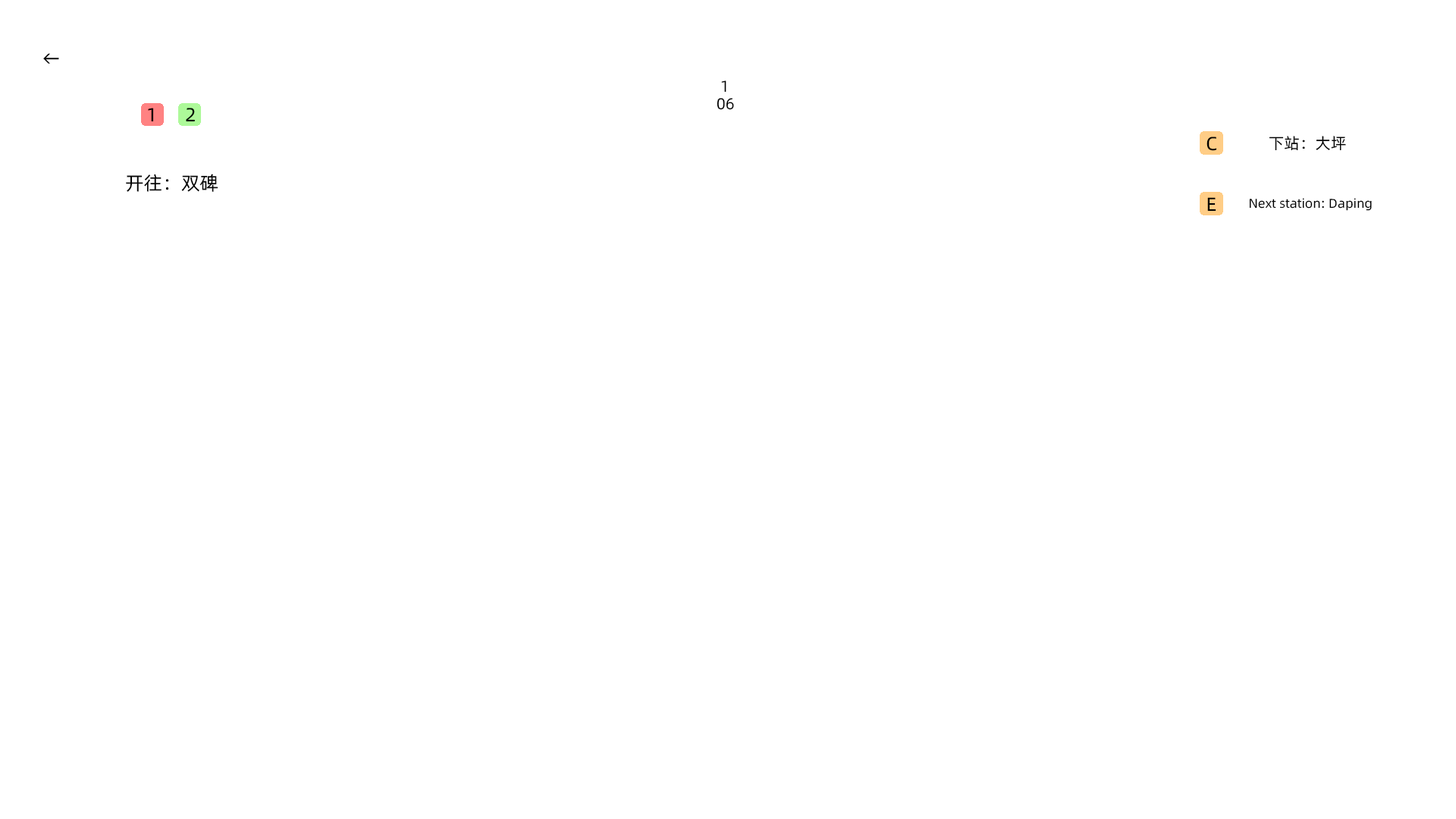
<style>
.page{position:relative;width:1456px;height:819px;background:#ffffff}
.page>*{position:absolute;margin:0}
.t1{font:19px "Alibaba-PuHuiTi-R";color:#000000}
.t2{font:15.8px "Alibaba-PuHuiTi-R";color:#000000}
.t3{font:12.6px "Alibaba-PuHuiTi-R";color:#000000}
</style>
<div class="page">
<p class="t1" style="left:43px;top:53px;width:16px;height:11px">←</p>
<p class="t2" style="left:721px;top:80px;width:5px;height:13px">1</p>
<p class="t2" style="left:717px;top:98px;width:17px;height:12px">06</p>
<p class="t1" style="left:148px;top:108px;width:6px;height:14px">1</p>
<p class="t1" style="left:186px;top:108px;width:9px;height:14px">2</p>
<p class="t1" style="left:1206px;top:136px;width:11px;height:15px">C</p>
<p class="t2" style="left:1269px;top:136px;width:77px;height:15px">下站：大坪</p>
<p class="t1" style="left:126px;top:174px;width:92px;height:18px">开往：双碑</p>
<p class="t1" style="left:1207px;top:197px;width:9px;height:15px">E</p>
<p class="t3" style="left:1249px;top:198px;width:123px;height:13px">Next station: Daping</p>
</div>
